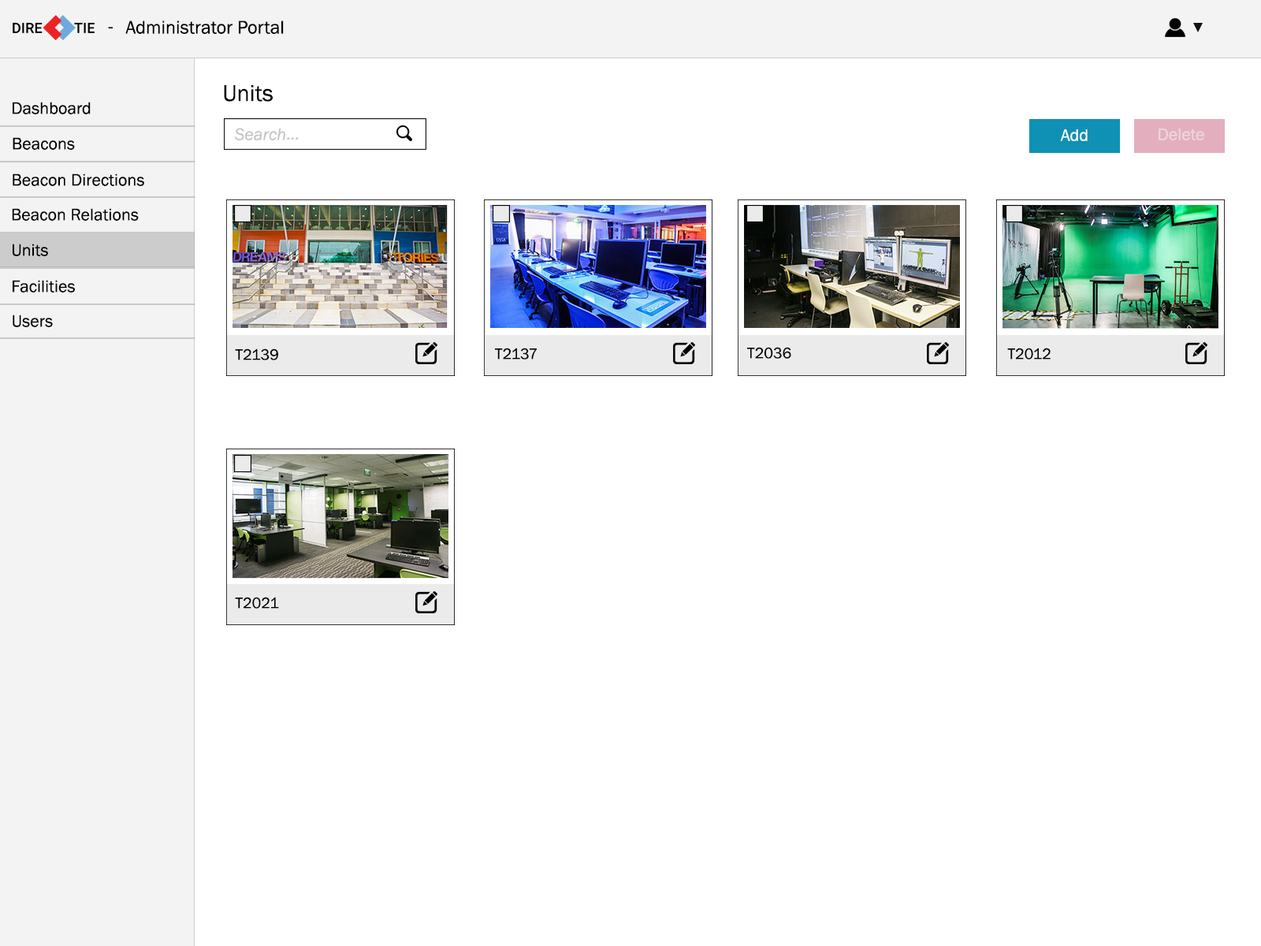
<style>
.page{position:relative;width:1261px;height:946px;background:#ffffff}
.page>*{position:absolute;margin:0}
.t1{font:18.9px "FranklinGothic-Book";color:#000000}
.t2{font:23.6px "FranklinGothic-Book";color:#000000}
.t3{font:17.3px "FranklinGothic-Book";color:#000000}
.t4{font:17.3px "FranklinGothic-Book";color:#ffffff}
.t5{font:17.3px "FranklinGothic-Book";color:#edd6db}
.t6{font:15.7px "FranklinGothic-Book";color:#000000}
</style>
<div class="page">
<p class="t1" style="left:108px;top:27px;width:5px;height:1px">-</p>
<p class="t1" style="left:125px;top:20px;width:159px;height:14px">Administrator Portal</p>
<p class="t2" style="left:224px;top:85px;width:49px;height:17px">Units</p>
<p class="t3" style="left:13px;top:102px;width:78px;height:12px">Dashboard</p>
<p class="t3" style="left:13px;top:137px;width:62px;height:13px">Beacons</p>
<p class="t4" style="left:1060px;top:129px;width:28px;height:12px">Add</p>
<p class="t5" style="left:1158px;top:128px;width:46px;height:12px">Delete</p>
<p class="t3" style="left:13px;top:173px;width:131px;height:13px">Beacon Directions</p>
<p class="t3" style="left:12px;top:208px;width:127px;height:13px">Beacon Relations</p>
<p class="t3" style="left:13px;top:244px;width:35px;height:12px">Units</p>
<p class="t3" style="left:13px;top:280px;width:62px;height:12px">Facilities</p>
<p class="t3" style="left:13px;top:314px;width:40px;height:13px">Users</p>
<p class="t6" style="left:235px;top:348px;width:43px;height:12px">T2139</p>
<p class="t6" style="left:495px;top:348px;width:42px;height:11px">T2137</p>
<p class="t6" style="left:747px;top:347px;width:44px;height:12px">T2036</p>
<p class="t6" style="left:1007px;top:348px;width:44px;height:11px">T2012</p>
<p class="t6" style="left:235px;top:597px;width:44px;height:11px">T2021</p>
</div>
